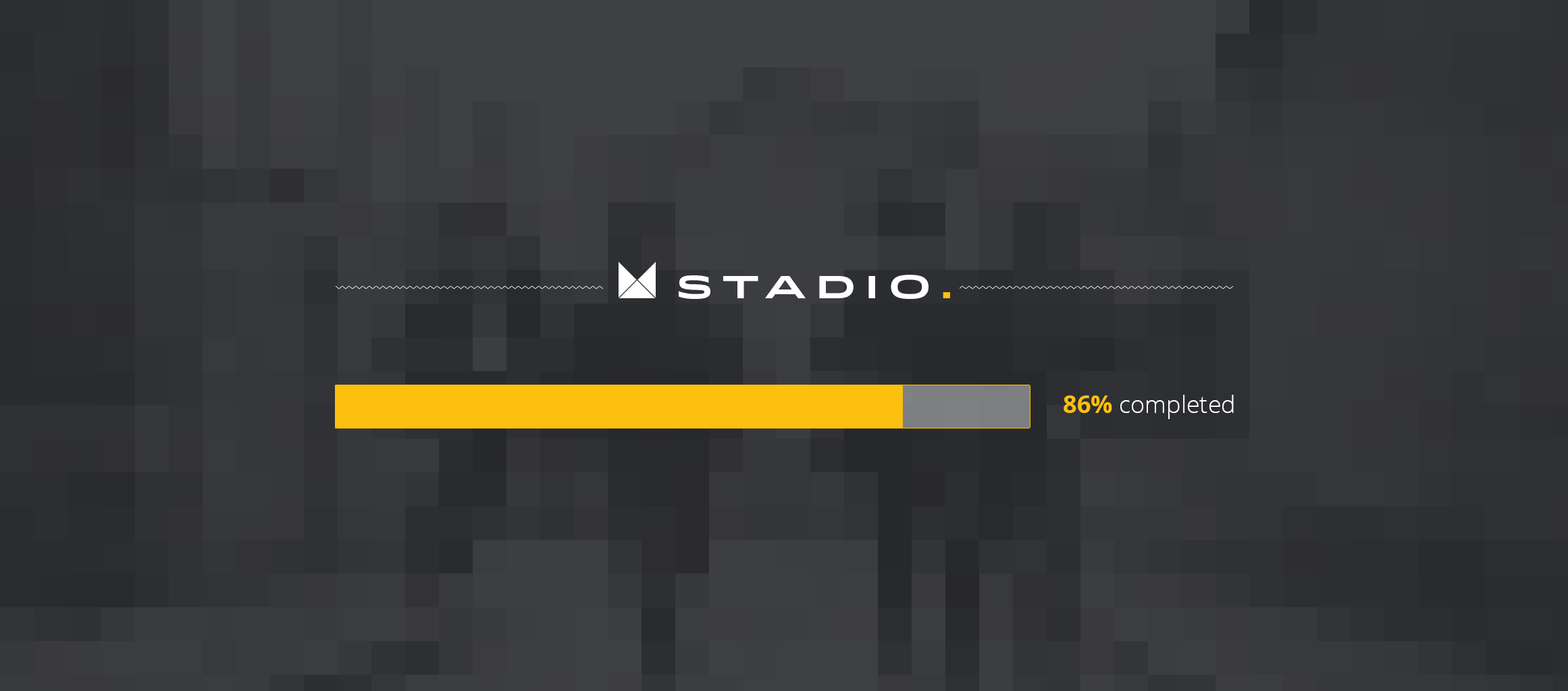
<style>
.page{position:relative;width:1568px;height:691px}
.page>*{position:absolute;margin:0}
.t1{font:32.1px "Idlewild-Bold";letter-spacing:0.3em;color:#ffffff;text-transform:uppercase}
.t2{font:32.1px "Idlewild-Bold";letter-spacing:0.3em;color:#fdc00f;text-transform:uppercase}
.t3{font:24.3px "OpenSans-Light";color:#ffffff}
.t4{font:24.3px "OpenSans-Bold";color:#fdc00f}
</style>
<div class="page">
<p class="t1" style="left:679px;top:275px;width:271px;height:24px">stAdio<span class="t2">.</span></p>
<p class="t3" style="left:1064px;top:395px;width:170px;height:24px"><span class="t4">86% </span>completed</p>
</div>
